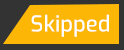
<style>
.page{position:relative;width:124px;height:50px;background:#fcb605}
.page>*{position:absolute;margin:0}
.t1{font:22.1px "Exo-Medium";color:#ffffff}
</style>
<div class="page">
<p class="t1" style="left:31px;top:14px;width:78px;height:23px">Skipped</p>
</div>
